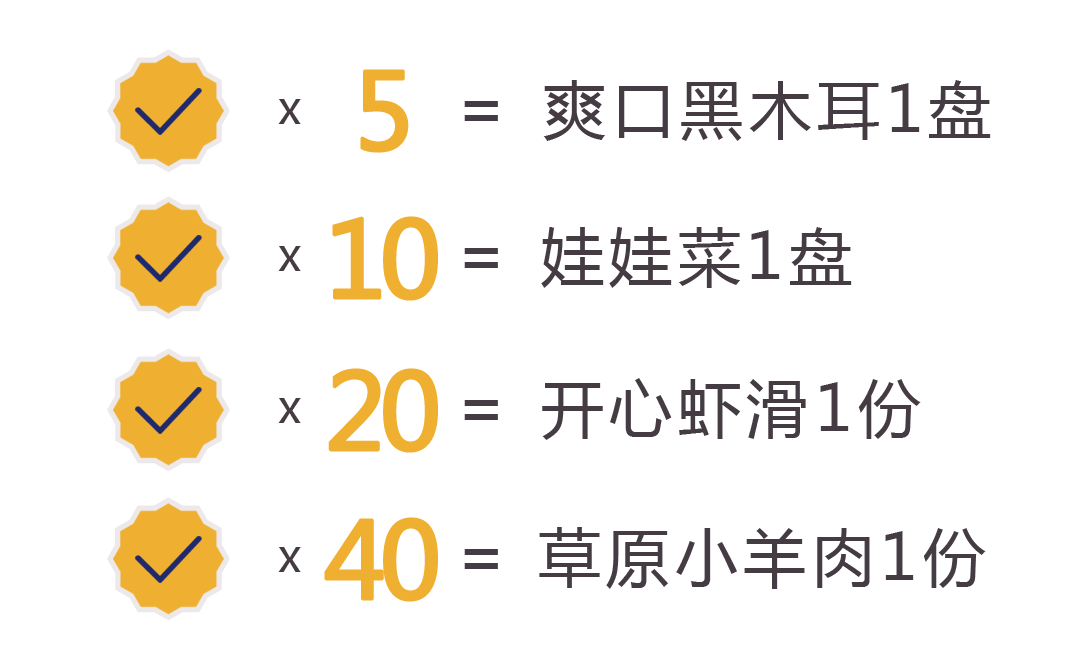
<style>
.page{position:relative;width:1080px;height:656px;background:#ffffff}
.page>*{position:absolute;margin:0}
.t1{font:104.2px "MicrosoftYaHei";letter-spacing:0.095em;color:#efaf30;font-weight:bold}
.t2{font:62.5px "MicrosoftYaHei";letter-spacing:0.095em;color:#453b43}
.t3{font:45.8px "MicrosoftYaHei";letter-spacing:0.095em;color:#453b43}
.t4{font:62.5px "MicrosoftYaHei";letter-spacing:0.095em;color:#453b43;font-weight:bold}
.t5{font:104.2px "MicrosoftYaHei";letter-spacing:-0.085em;color:#efaf30;font-weight:bold}
</style>
<div class="page">
<p class="t1" style="left:360px;top:69px;width:49px;height:84px">5</p>
<p class="t2" style="left:543px;top:80px;width:448px;height:61px">爽口黑木耳1盘</p>
<p class="t3" style="left:278px;top:99px;width:23px;height:25px">x</p>
<p class="t4" style="left:464px;top:101px;width:34px;height:20px">=</p>
<p class="t5" style="left:332px;top:216px;width:106px;height:85px">10</p>
<p class="t2" style="left:541px;top:227px;width:311px;height:61px">娃娃菜1盘</p>
<p class="t3" style="left:278px;top:246px;width:23px;height:25px">x</p>
<p class="t4" style="left:464px;top:248px;width:34px;height:20px">=</p>
<p class="t5" style="left:328px;top:368px;width:110px;height:85px">20</p>
<p class="t2" style="left:542px;top:378px;width:379px;height:62px">开心虾滑1份</p>
<p class="t3" style="left:278px;top:398px;width:23px;height:25px">x</p>
<p class="t4" style="left:464px;top:400px;width:34px;height:20px">=</p>
<p class="t5" style="left:324px;top:517px;width:114px;height:85px">40</p>
<p class="t2" style="left:539px;top:527px;width:447px;height:62px">草原小羊肉1份</p>
<p class="t3" style="left:278px;top:547px;width:23px;height:25px">x</p>
<p class="t4" style="left:464px;top:549px;width:34px;height:20px">=</p>
</div>
